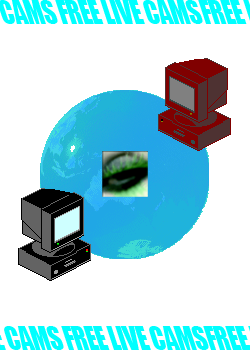
<style>
.page{position:relative;width:250px;height:350px;background:#ffffff}
.page>*{position:absolute;margin:0}
.t1{font:31.5px "Impact";letter-spacing:-0.025em;color:#00ffff;scale:0.79 1}
</style>
<div class="page">
<p class="t1" style="left:55px;top:0px;width:148px;height:24px">FREE LIVE CAMS</p>
<p class="t1" style="left:61px;top:326px;width:148px;height:24px">FREE LIVE CAMS</p>
</div>
